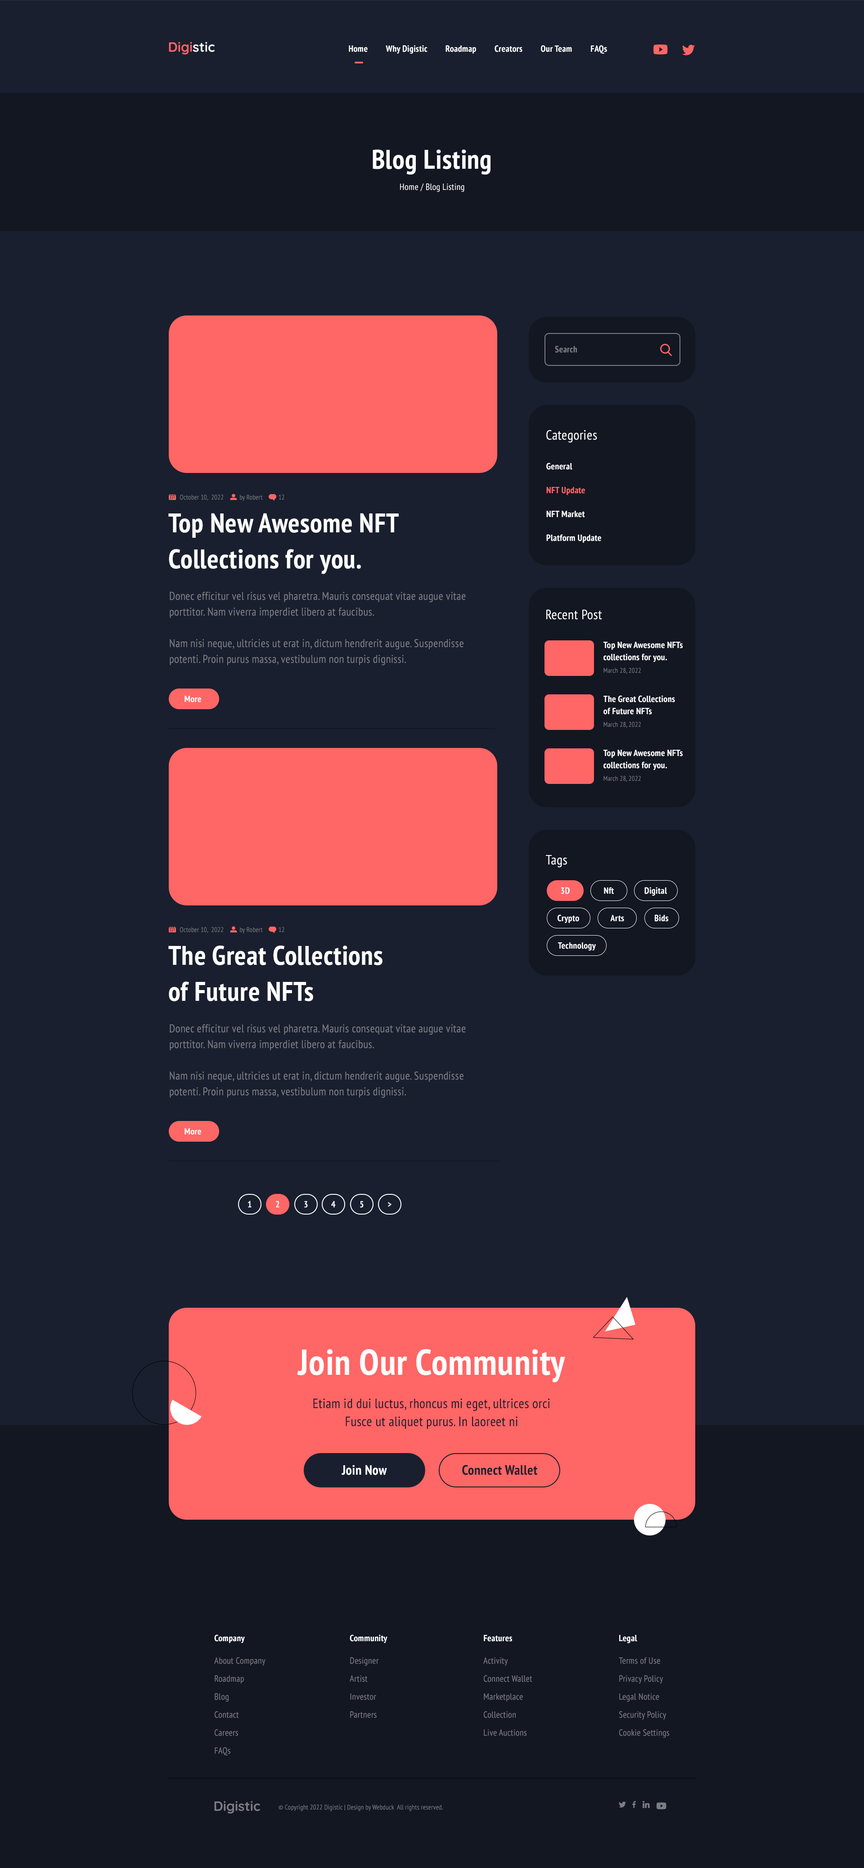
<style>
.page{position:relative;width:864px;height:1868px;background:#191f2e}
.page>*{position:absolute;margin:0}
.t1{font:9px "PTSans-NarrowBold";letter-spacing:0.02em;color:#ffffff}
.t2{font:27px "PTSans-NarrowBold";letter-spacing:0.02em;color:#ffffff}
.t3{font:9px "PTSans-Narrow";letter-spacing:0.02em;color:#ffffff}
.t4{font:9px "PTSans-NarrowBold";letter-spacing:0.02em;color:#7c7e83}
.t5{font:13.5px "PTSans-Narrow";letter-spacing:0.02em;color:#ffffff}
.t6{font:9px/23.9px "PTSans-NarrowBold";letter-spacing:0.02em;color:#ffffff}
.t7{font:9px/23.9px "PTSans-NarrowBold";letter-spacing:0.02em;color:#ff6666}
.t8{font:6.8px "PTSans-Narrow";letter-spacing:0.02em;color:#7c7e83}
.t9{font:27px/36px "PTSans-NarrowBold";letter-spacing:0.02em;color:#ffffff}
.t10{font:11.2px/15.8px "PTSans-Narrow";letter-spacing:0.02em;color:#7c7e83}
.t11{font:9px/12.2px "PTSans-NarrowBold";letter-spacing:0.02em;color:#ffffff}
.t12{font:9px "PTSans-NarrowBold";letter-spacing:0.02em;color:#fefefe}
.t13{font:36px "PTSans-NarrowBold";letter-spacing:0.02em;color:#ffffff}
.t14{font:13.5px/18px "PTSans-Narrow";letter-spacing:0.02em;color:#191f2e}
.t15{font:13.5px "PTSans-NarrowBold";letter-spacing:0.02em;color:#ffffff}
.t16{font:13.5px "PTSans-NarrowBold";letter-spacing:0.02em;color:#191f2e}
.t17{font:9px/18px "PTSans-Narrow";letter-spacing:0.02em;color:#7c7e83}
</style>
<div class="page">
<p class="t1" style="left:349px;top:45px;width:258px;height:9px">Home         Why Digistic         Roadmap         Creators         Our Team         FAQs</p>
<p class="t2" style="left:373px;top:149px;width:117px;height:26px">Blog Listing</p>
<p class="t3" style="left:400px;top:183px;width:64px;height:9px">Home / Blog Listing</p>
<p class="t4" style="left:555px;top:346px;width:22px;height:7px">Search</p>
<p class="t5" style="left:546px;top:430px;width:51px;height:13px">Categories</p>
<p class="t6" style="left:546px;top:463px;width:55px;height:80px">General<br><span class="t7">NFT Update<br></span>NFT Market<br>Platform Update</p>
<p class="t8" style="left:180px;top:495px;width:104px;height:6px">October 10,  2022          by Robert          12</p>
<p class="t9" style="left:168px;top:513px;width:231px;height:61px">Top New Awesome NFT Collections for you.</p>
<p class="t10" style="left:170px;top:592px;width:296px;height:74px">Donec efficitur vel risus vel pharetra. Mauris consequat vitae augue vitae porttitor. Nam viverra imperdiet libero at faucibus. <br><br>Nam nisi neque, ultricies ut erat in, dictum hendrerit augue. Suspendisse potenti. Proin purus massa, vestibulum non turpis dignissi.</p>
<p class="t5" style="left:546px;top:609px;width:56px;height:11px">Recent Post</p>
<p class="t11" style="left:603px;top:642px;width:80px;height:20px">Top New Awesome NFTs collections for you.</p>
<p class="t8" style="left:603px;top:668px;width:38px;height:6px">March 28, 2022</p>
<p class="t12" style="left:184px;top:696px;width:17px;height:6px">More</p>
<p class="t11" style="left:603px;top:695px;width:72px;height:20px">The Great Collections<br>of Future NFTs</p>
<p class="t8" style="left:603px;top:722px;width:38px;height:6px">March 28, 2022</p>
<p class="t11" style="left:603px;top:750px;width:80px;height:20px">Top New Awesome NFTs collections for you.</p>
<p class="t8" style="left:603px;top:776px;width:38px;height:6px">March 28, 2022</p>
<p class="t5" style="left:546px;top:855px;width:21px;height:13px">Tags</p>
<p class="t12" style="left:561px;top:887px;width:9px;height:7px">3D</p>
<p class="t12" style="left:604px;top:887px;width:10px;height:7px">Nft</p>
<p class="t12" style="left:644px;top:887px;width:23px;height:9px">Digital</p>
<p class="t12" style="left:558px;top:914px;width:21px;height:9px">Crypto</p>
<p class="t12" style="left:610px;top:915px;width:14px;height:7px">Arts</p>
<p class="t12" style="left:655px;top:914px;width:13px;height:8px">Bids</p>
<p class="t8" style="left:180px;top:927px;width:104px;height:6px">October 10,  2022          by Robert          12</p>
<p class="t9" style="left:168px;top:945px;width:214px;height:56px">The Great Collections<br>of Future NFTs</p>
<p class="t12" style="left:558px;top:942px;width:38px;height:9px">Technology</p>
<p class="t10" style="left:170px;top:1024px;width:296px;height:74px">Donec efficitur vel risus vel pharetra. Mauris consequat vitae augue vitae porttitor. Nam viverra imperdiet libero at faucibus. <br><br>Nam nisi neque, ultricies ut erat in, dictum hendrerit augue. Suspendisse potenti. Proin purus massa, vestibulum non turpis dignissi.</p>
<p class="t12" style="left:184px;top:1128px;width:17px;height:7px">More</p>
<p class="t12" style="left:248px;top:1201px;width:4px;height:6px">1</p>
<p class="t12" style="left:276px;top:1201px;width:3px;height:6px">2</p>
<p class="t12" style="left:304px;top:1201px;width:4px;height:7px">3</p>
<p class="t12" style="left:331px;top:1201px;width:5px;height:6px">4</p>
<p class="t12" style="left:360px;top:1201px;width:4px;height:7px">5</p>
<p class="t12" style="left:388px;top:1202px;width:4px;height:5px">&gt;</p>
<p class="t13" style="left:297px;top:1349px;width:268px;height:33px">Join Our Community</p>
<p class="t14" style="left:313px;top:1398px;width:237px;height:31px;text-align:center">Etiam id dui luctus, rhoncus mi eget, ultrices orci<br>Fusce ut aliquet purus. In laoreet ni</p>
<p class="t15" style="left:342px;top:1465px;width:45px;height:10px">Join Now</p>
<p class="t16" style="left:462px;top:1465px;width:75px;height:10px">Connect Wallet</p>
<p class="t1" style="left:214px;top:1634px;width:31px;height:9px">Company</p>
<p class="t1" style="left:350px;top:1634px;width:37px;height:9px">Community</p>
<p class="t1" style="left:484px;top:1635px;width:28px;height:7px">Features</p>
<p class="t1" style="left:619px;top:1635px;width:18px;height:8px">Legal</p>
<p class="t17" style="left:214px;top:1657px;width:52px;height:98px">About Company<br>Roadmap<br>Blog<br>Contact<br>Careers<br>FAQs</p>
<p class="t17" style="left:350px;top:1657px;width:29px;height:61px">Designer<br>Artist<br>Investor<br>Partners</p>
<p class="t17" style="left:483px;top:1657px;width:49px;height:79px">Activity<br>Connect Wallet<br>Marketplace<br>Collection<br>Live Auctions</p>
<p class="t17" style="left:619px;top:1657px;width:50px;height:81px">Terms of Use<br>Privacy Policy<br>Legal Notice<br>Security Policy<br>Cookie Settings</p>
<p class="t8" style="left:279px;top:1804px;width:164px;height:7px">© Copyright 2022 Digistic | Design by Webduck  All rights reserved.</p>
</div>
